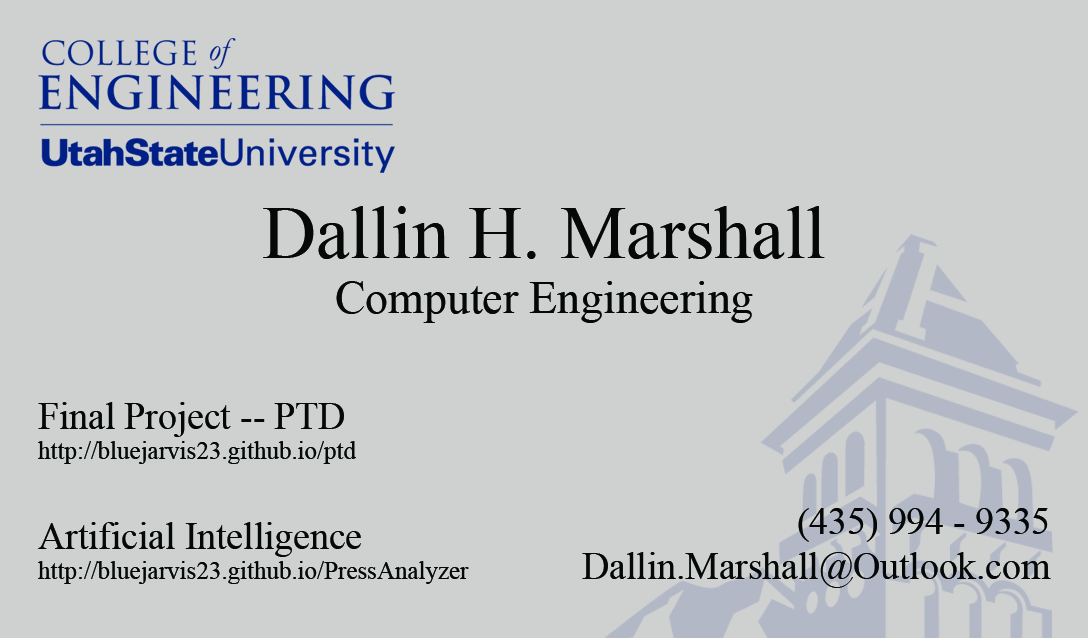
<style>
.page{position:relative;width:1088px;height:638px;background:#cfd0d0}
.page>*{position:absolute;margin:0}
.t1{font:45.8px "TimesNewRomanPSMT";color:#060808}
.t2{font:75px "TimesNewRomanPSMT";color:#060808}
.t3{font:25px "TimesNewRomanPSMT";color:#060808}
.t4{font:37.5px "TimesNewRomanPSMT";color:#060808}
</style>
<div class="page">
<p class="t1" style="left:263px;top:206px;width:562px;height:117px;text-align:center"><span class="t2">Dallin H. Marshall<br></span>Computer Engineering</p>
<p class="t3" style="left:38px;top:402px;width:431px;height:182px"><span class="t4">Final Project -- PTD </span>http://bluejarvis23.github.io/ptd<br><span class="t4"><br>Artificial Intelligence<br></span>http://bluejarvis23.github.io/PressAnalyzer</p>
<p class="t4" style="left:582px;top:508px;width:469px;height:80px;text-align:right">(435) 994 - 9335<br>Dallin.Marshall@Outlook.com</p>
</div>
